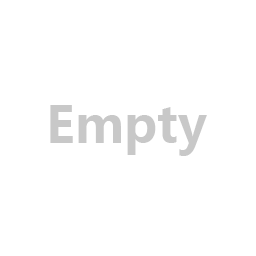
<style>
.page{position:relative;width:256px;height:256px;background:#ffffff}
.page>*{position:absolute;margin:0}
.t1{font:50px "MicrosoftYaHei-Bold";color:#c8c8c8}
</style>
<div class="page">
<p class="t1" style="left:50px;top:105px;width:157px;height:51px">Empty</p>
</div>
